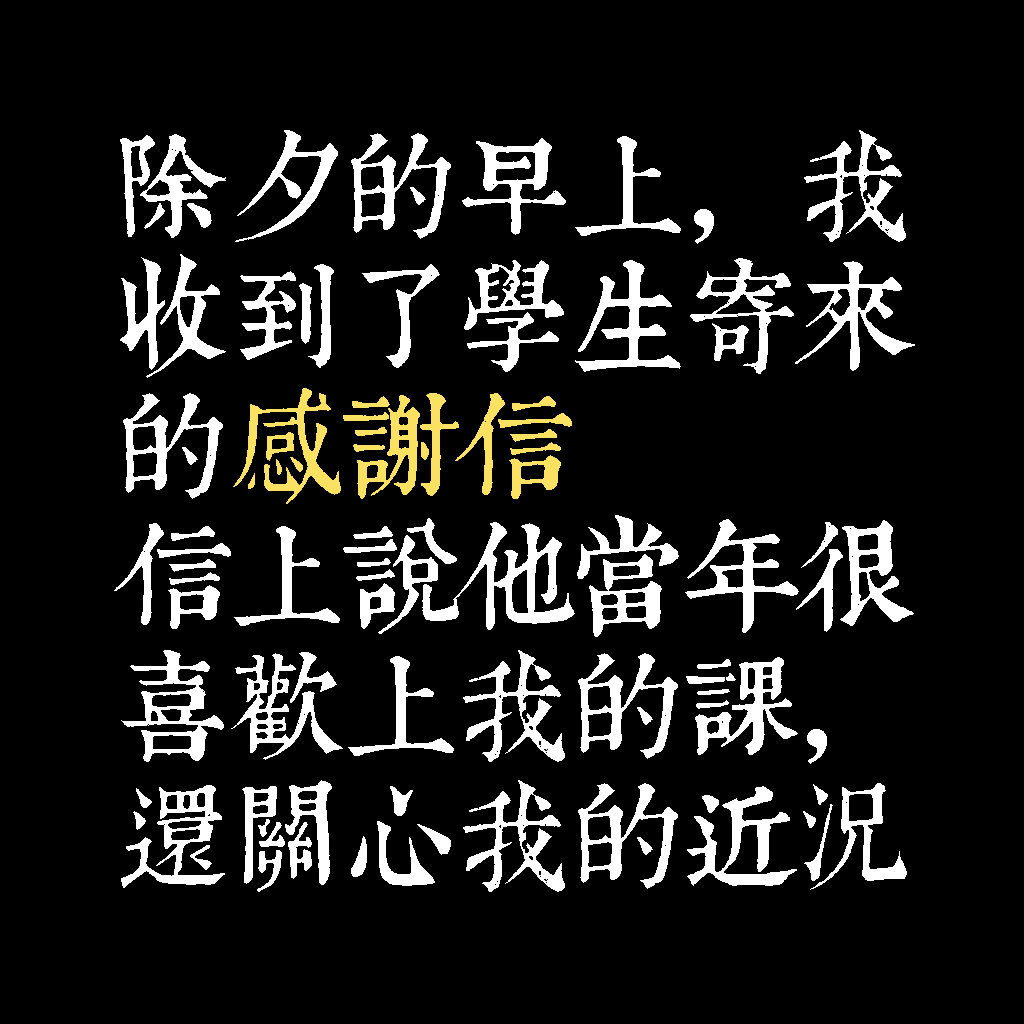
<style>
.page{position:relative;width:1024px;height:1024px;background:#000000}
.page>*{position:absolute;margin:0}
.t1{font:116px/130px "TpldKhangXiDictTrial";letter-spacing:-0.02em;color:#ffffff}
.t2{font:116px/130px "TpldKhangXiDictTrial";letter-spacing:-0.02em;color:#fbe161}
</style>
<div class="page">
<p class="t1" style="left:114px;top:130px;width:801px;height:762px">除夕的早上，我<br>收到了學生寄來<br>的<span class="t2">感謝信<br></span>信上說他當年很<br>喜歡上我的課，<br>還關心我的近況</p>
</div>
